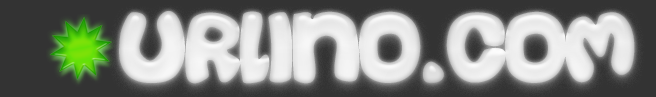
<style>
.page{position:relative;width:656px;height:97px;background:#333333}
.page>*{position:absolute;margin:0}
.t1{font:71.7px "Casual-Regular";color:#ffffff}
</style>
<div class="page">
<p class="t1" style="left:119px;top:11px;width:516px;height:73px">urlino.com</p>
</div>
